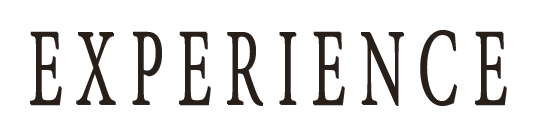
<style>
.page{position:relative;width:535px;height:136px;background:#ffffff}
.page>*{position:absolute;margin:0}
.t1{font:135.6px "AdobeThai-Regular";letter-spacing:0.2em;color:#291f19;text-transform:uppercase;scale:0.54 1}
</style>
<div class="page">
<p class="t1" style="left:30px;top:29px;width:476px;height:76px">EXPERIENCE</p>
</div>
